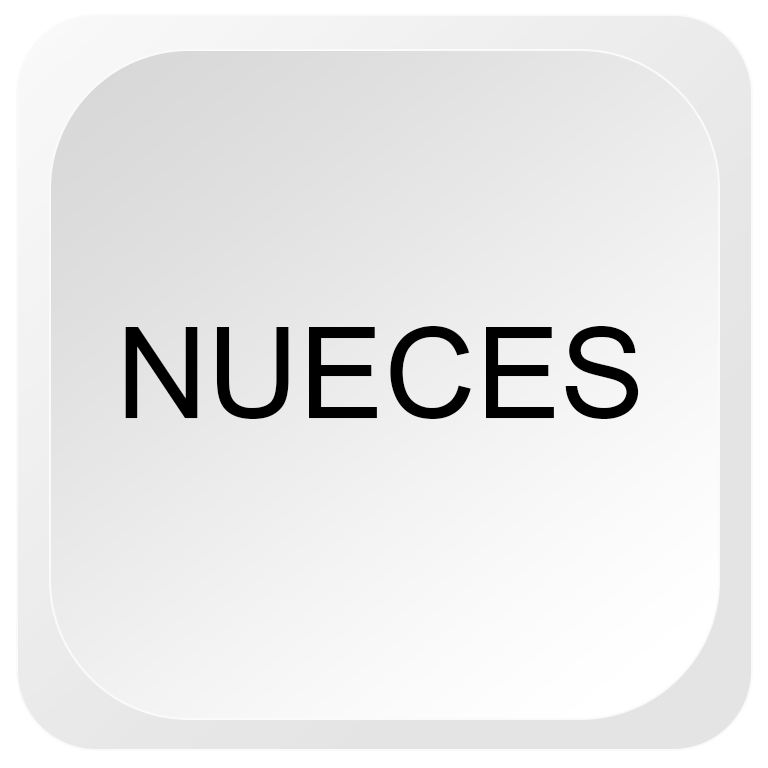
<style>
.page{position:relative;width:768px;height:768px}
.page>*{position:absolute;margin:0}
.t1{font:127px "ArialMT";color:#000000}
</style>
<div class="page">
<p class="t1" style="left:125px;top:326px;width:514px;height:93px">NUECES</p>
</div>
